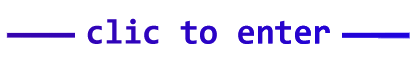
<style>
.page{position:relative;width:419px;height:68px;background:#ffffff}
.page>*{position:absolute;margin:0}
.t1{font:35px "Consolas-Bold";letter-spacing:-0.01em;color:#3204b6}
</style>
<div class="page">
<p class="t1" style="left:87px;top:18px;width:243px;height:26px">clic to enter</p>
</div>
